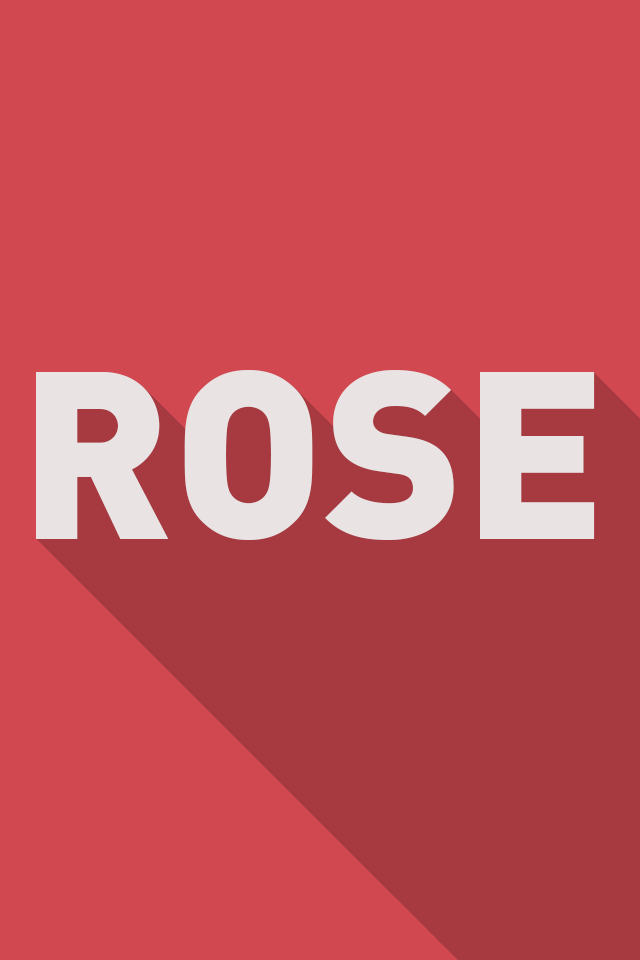
<style>
.page{position:relative;width:640px;height:960px;background:#d14850}
.page>*{position:absolute;margin:0}
.t1{font:235.5px "DINPro-Black";color:#eae3e3}
</style>
<div class="page">
<p class="t1" style="left:36px;top:370px;width:559px;height:170px">ROSE</p>
</div>
